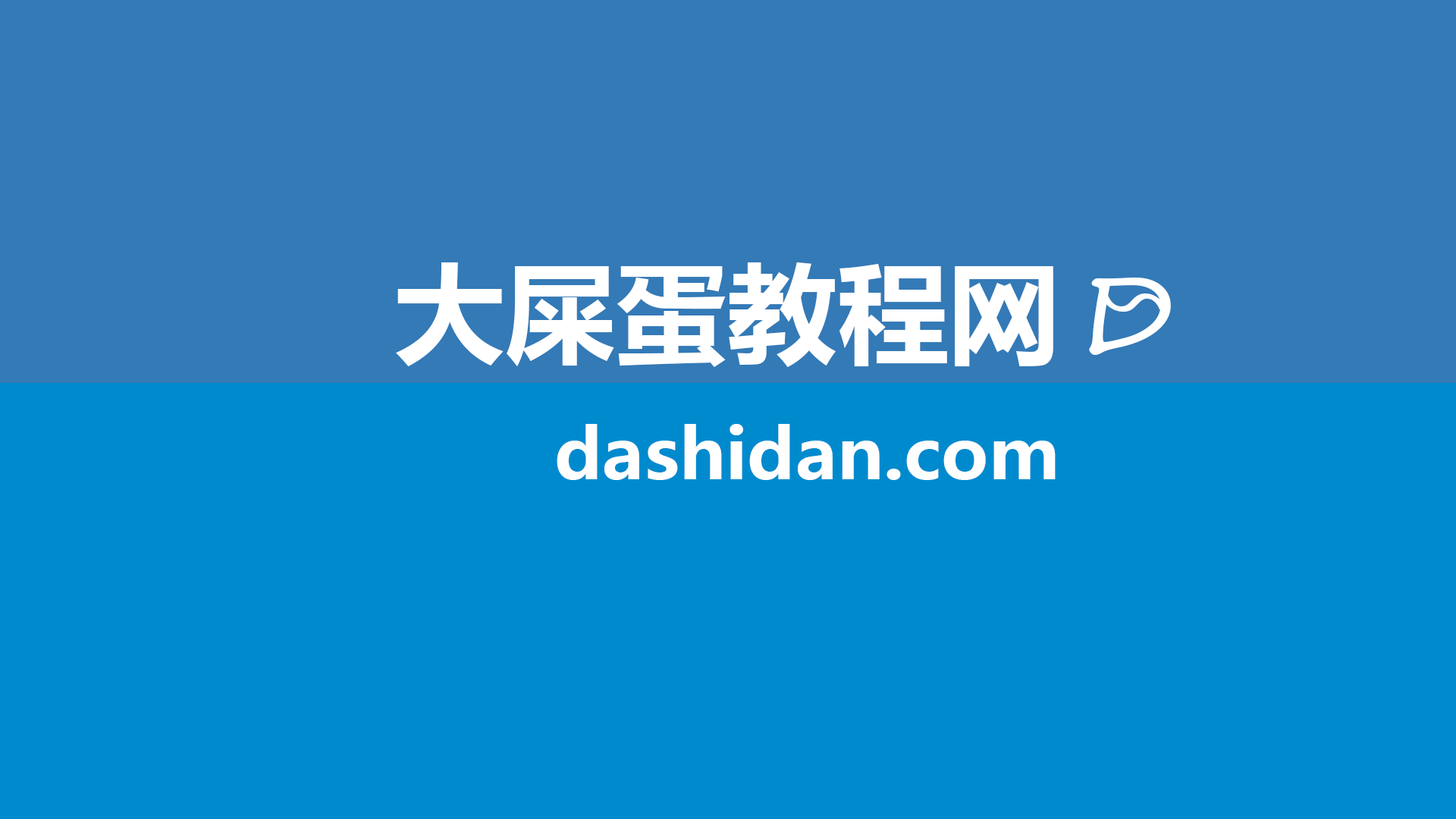
<style>
.page{position:relative;width:1456px;height:819px;background:#008ace}
.page>*{position:absolute;margin:0}
.t1{font:108.8px "MicrosoftYaHei-Bold";color:#ffffff}
.t2{font:102.2px "SegoePrint";color:#ffffff;scale:1.17 1}
.t3{font:53.4px "LithosPro-Regular";color:#ffffff;scale:1.68 1}
.t4{font:69.6px "MicrosoftYaHei-Bold";color:#ffffff;scale:1.04 1}
</style>
<div class="page">
<p class="t1" style="left:396px;top:262px;width:657px;height:105px">大屎蛋教程网</p>
<p class="t2" style="left:1089px;top:278px;width:82px;height:77px">D</p>
<p class="t3" style="left:1101px;top:293px;width:65px;height:19px">S</p>
<p class="t4" style="left:557px;top:424px;width:499px;height:56px">dashidan.com</p>
</div>
